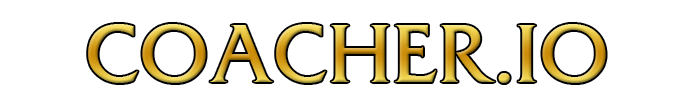
<style>
.page{position:relative;width:700px;height:102px;background:#ffffff}
.page>*{position:absolute;margin:0}
.t1{font:75px "FrizQuadrataFont"}
</style>
<div class="page">
<p class="t1" style="left:88px;top:24px;width:518px;height:59px">COACHER.IO</p>
</div>
